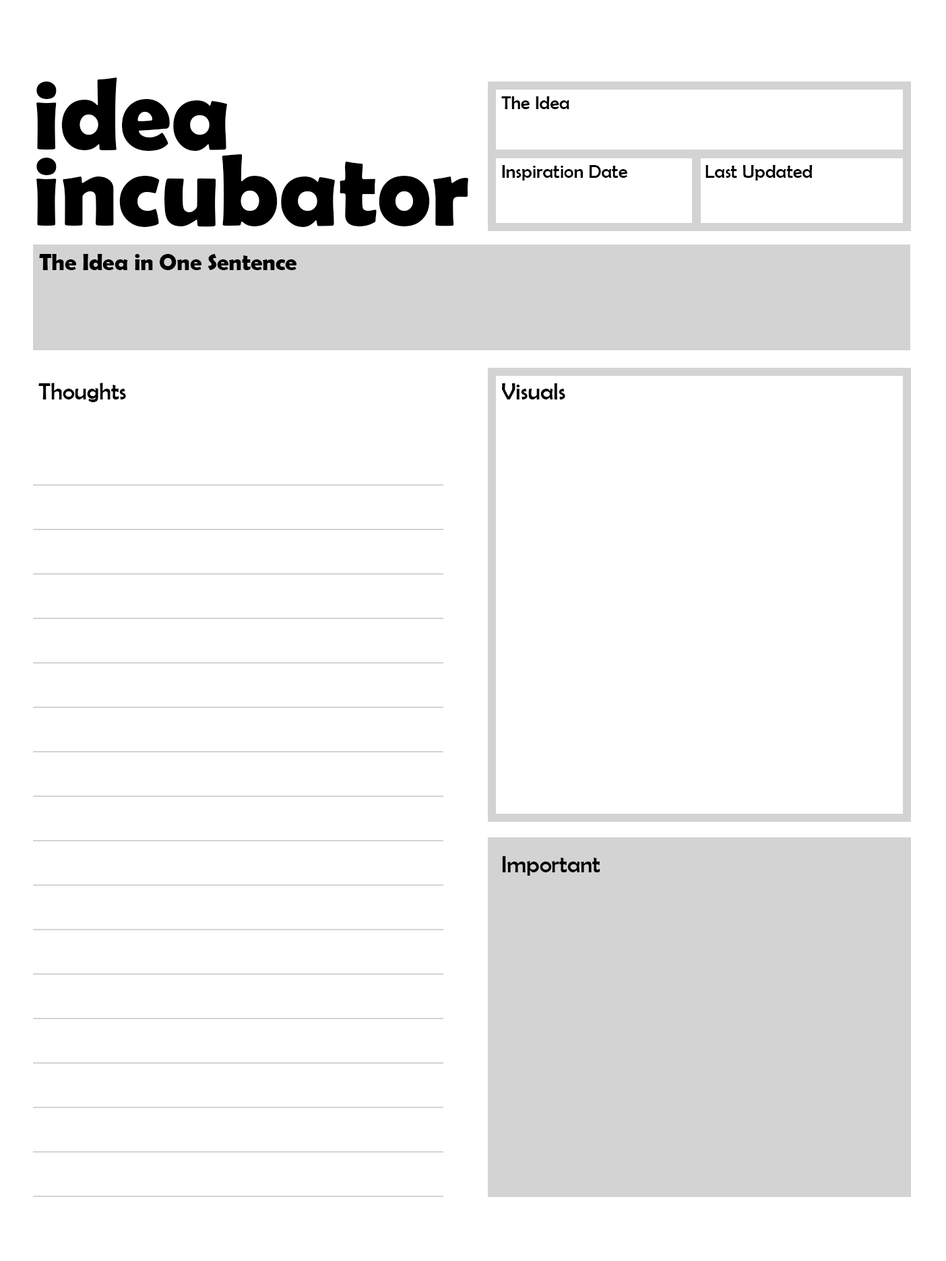
<style>
.page{position:relative;width:946px;height:1261px;background:#ffffff}
.page>*{position:absolute;margin:0}
.t1{font:101.5px/76.1px "BerlinSansFBDemi-Bold";color:#000000}
.t2{font:19px "BerlinSansFB-Reg";color:#000000}
.t3{font:23.3px "BerlinSansFBDemi-Bold";color:#000000}
.t4{font:23.3px "BerlinSansFB-Reg";color:#000000}
</style>
<div class="page">
<p class="t1" style="left:36px;top:77px;width:432px;height:150px">idea<br>incubator</p>
<p class="t2" style="left:501px;top:96px;width:68px;height:13px">The Idea</p>
<p class="t2" style="left:502px;top:165px;width:125px;height:16px">Inspiration Date</p>
<p class="t2" style="left:705px;top:165px;width:107px;height:16px">Last Updated</p>
<p class="t3" style="left:39px;top:254px;width:258px;height:16px">The Idea in One Sentence</p>
<p class="t4" style="left:38px;top:383px;width:88px;height:19px">Thoughts</p>
<p class="t4" style="left:502px;top:383px;width:63px;height:16px">Visuals</p>
<p class="t4" style="left:502px;top:856px;width:98px;height:20px">Important</p>
</div>
